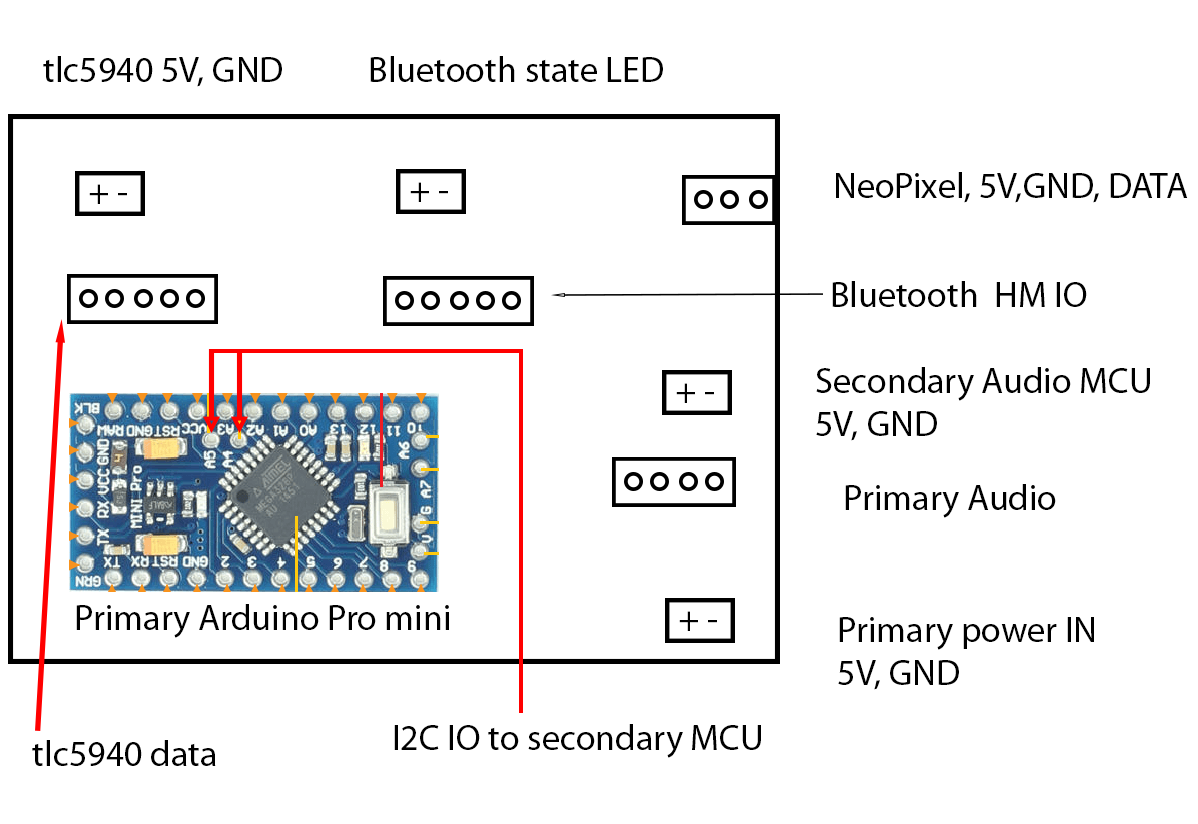
<style>
.page{position:relative;width:1198px;height:824px;background:#ffffff}
.page>*{position:absolute;margin:0}
.t1{font:36px "MyriadPro-Regular";color:#000000}
</style>
<div class="page">
<p class="t1" style="left:43px;top:56px;width:239px;height:31px">tlc5940 5V, GND</p>
<p class="t1" style="left:370px;top:56px;width:293px;height:26px">Bluetooth state LED</p>
<p class="t1" style="left:836px;top:172px;width:352px;height:31px">NeoPixel, 5V,GND, DATA</p>
<p class="t1" style="left:89px;top:184px;width:38px;height:20px">+ -</p>
<p class="t1" style="left:410px;top:182px;width:38px;height:20px">+ -</p>
<p class="t1" style="left:832px;top:281px;width:255px;height:26px">Bluetooth  HM IO</p>
<p class="t1" style="left:816px;top:367px;width:334px;height:74px">Secondary Audio MCU<br>5V, GND</p>
<p class="t1" style="left:676px;top:383px;width:38px;height:20px">+ -</p>
<p class="t1" style="left:845px;top:484px;width:211px;height:34px">Primary Audio</p>
<p class="t1" style="left:76px;top:604px;width:373px;height:34px">Primary Arduino Pro mini</p>
<p class="t1" style="left:679px;top:611px;width:38px;height:20px">+ -</p>
<p class="t1" style="left:838px;top:617px;width:256px;height:73px">Primary power IN<br>5V, GND</p>
<p class="t1" style="left:394px;top:724px;width:367px;height:34px">I2C IO to secondary MCU</p>
<p class="t1" style="left:32px;top:740px;width:184px;height:26px">tlc5940 data</p>
</div>
